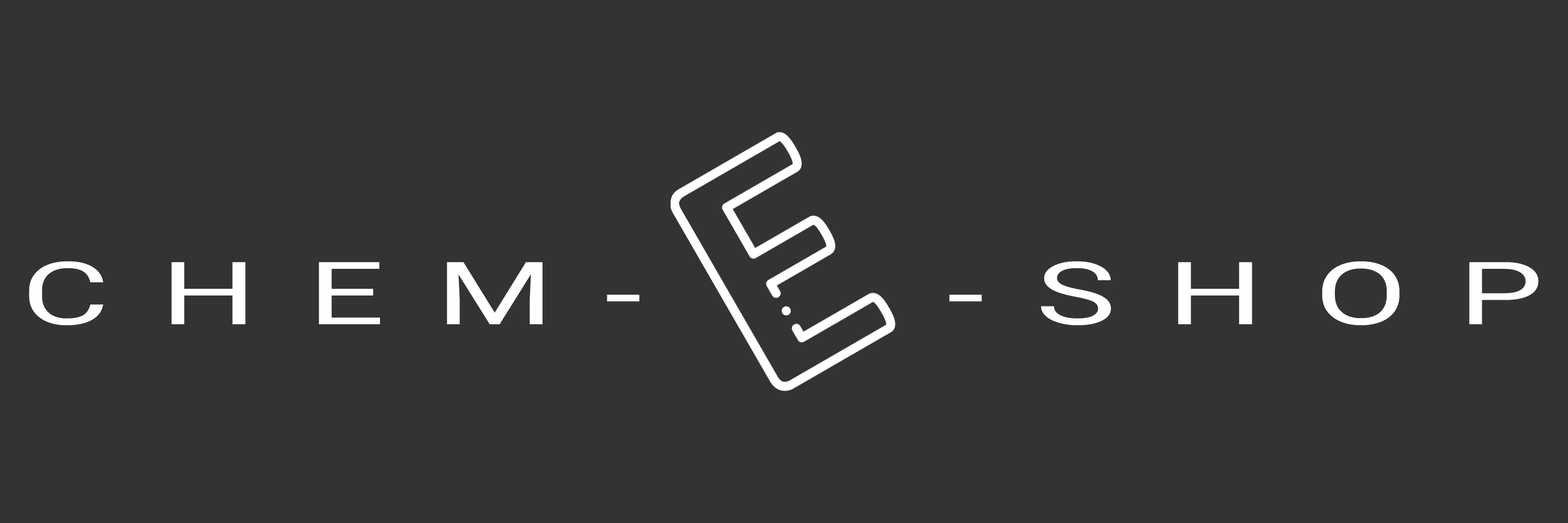
<style>
.page{position:relative;width:1568px;height:523px;background:#333333}
.page>*{position:absolute;margin:0}
.t1{font:87.3px "Roboto-Regular";letter-spacing:0.38em;color:#ffffff;scale:1.54 1}
</style>
<div class="page">
<p class="t1" style="left:29px;top:261px;width:1510px;height:64px">CHEM-   -SHOP</p>
</div>
